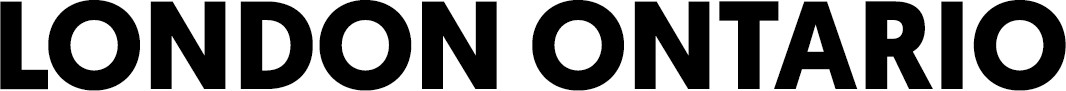
<style>
.page{position:relative;width:1066px;height:91px;background:#000000}
.page>*{position:absolute;margin:0}
.t1{font:125px "Geomanist-Bold";color:#000000}
</style>
<div class="page">
<p class="t1" style="left:0px;top:0px;width:1066px;height:91px">LONDON ONTARIO</p>
<p class="t1" style="left:0px;top:0px;width:1066px;height:91px">LONDON ONTARIO</p>
</div>
